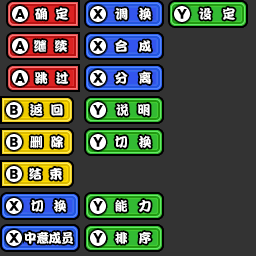
<style>
.page{position:relative;width:256px;height:256px;background:#333333}
.page>*{position:absolute;margin:0}
.t1{font:13px "DFPKanTingLiuW9";letter-spacing:-0.025em;color:#ffffff}
.t2{font:13px "DFPKanTingLiuW9";letter-spacing:0.05em;color:#ffffff}
.t3{font:12.3px "DFPKanTingLiuW9";letter-spacing:0.05em;color:#ffffff;scale:1.05 1}
.t4{font:13px "DFPKanTingLiuW9";color:#ffffff}
.t5{font:13px "DFPKanTingLiuW9";letter-spacing:0.025em;color:#ffffff}
.t6{font:13px "DFPKanTingLiuW9";letter-spacing:-0.05em;color:#ffffff}
</style>
<div class="page">
<p class="t1" style="left:35px;top:7px;width:33px;height:13px">确  定</p>
<p class="t2" style="left:115px;top:7px;width:36px;height:13px">调  换</p>
<p class="t2" style="left:199px;top:7px;width:36px;height:13px">设  定</p>
<p class="t1" style="left:34px;top:40px;width:33px;height:12px">继  续</p>
<p class="t2" style="left:115px;top:40px;width:36px;height:12px">合  <span class="t3">成</span></p>
<p class="t1" style="left:35px;top:72px;width:33px;height:12px">跳  过</p>
<p class="t2" style="left:115px;top:71px;width:36px;height:13px">分  离</p>
<p class="t1" style="left:30px;top:103px;width:33px;height:13px">返  回</p>
<p class="t4" style="left:116px;top:103px;width:34px;height:13px">说  明</p>
<p class="t1" style="left:30px;top:135px;width:33px;height:13px">删  除</p>
<p class="t2" style="left:115px;top:135px;width:36px;height:13px">切  换</p>
<p class="t1" style="left:29px;top:168px;width:33px;height:12px">结  束</p>
<p class="t5" style="left:31px;top:199px;width:35px;height:13px">切  换</p>
<p class="t2" style="left:115px;top:200px;width:36px;height:12px">能  力</p>
<p class="t6" style="left:24px;top:232px;width:49px;height:12px">中意成员</p>
<p class="t2" style="left:115px;top:232px;width:36px;height:12px">排  序</p>
</div>
